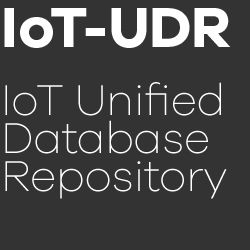
<style>
.page{position:relative;width:250px;height:250px;background:#333333}
.page>*{position:absolute;margin:0}
.t1{font:58.5px "GalanoGrotesque-Bold";letter-spacing:-0.01em;color:#ffffff}
.t2{font:58.5px "GalanoGrotesque-Bold";letter-spacing:0.025em;color:#ffffff}
.t3{font:44.5px/38px "GalanoGrotesque-ExtraLight";letter-spacing:-0.01em;color:#ffffff}
</style>
<div class="page">
<p class="t1" style="left:4px;top:8px;width:227px;height:40px"><span class="t2">I</span>oT-UDR</p>
<p class="t3" style="left:5px;top:82px;width:222px;height:117px">IoT Unified<br>Database<br>Repository</p>
</div>
